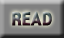
<style>
.page{position:relative;width:64px;height:38px;background:#808080}
.page>*{position:absolute;margin:0}
.t1{font:18px "GothicXB-HM"}
</style>
<div class="page">
<p class="t1" style="left:12px;top:11px;width:40px;height:15px">READ</p>
</div>
